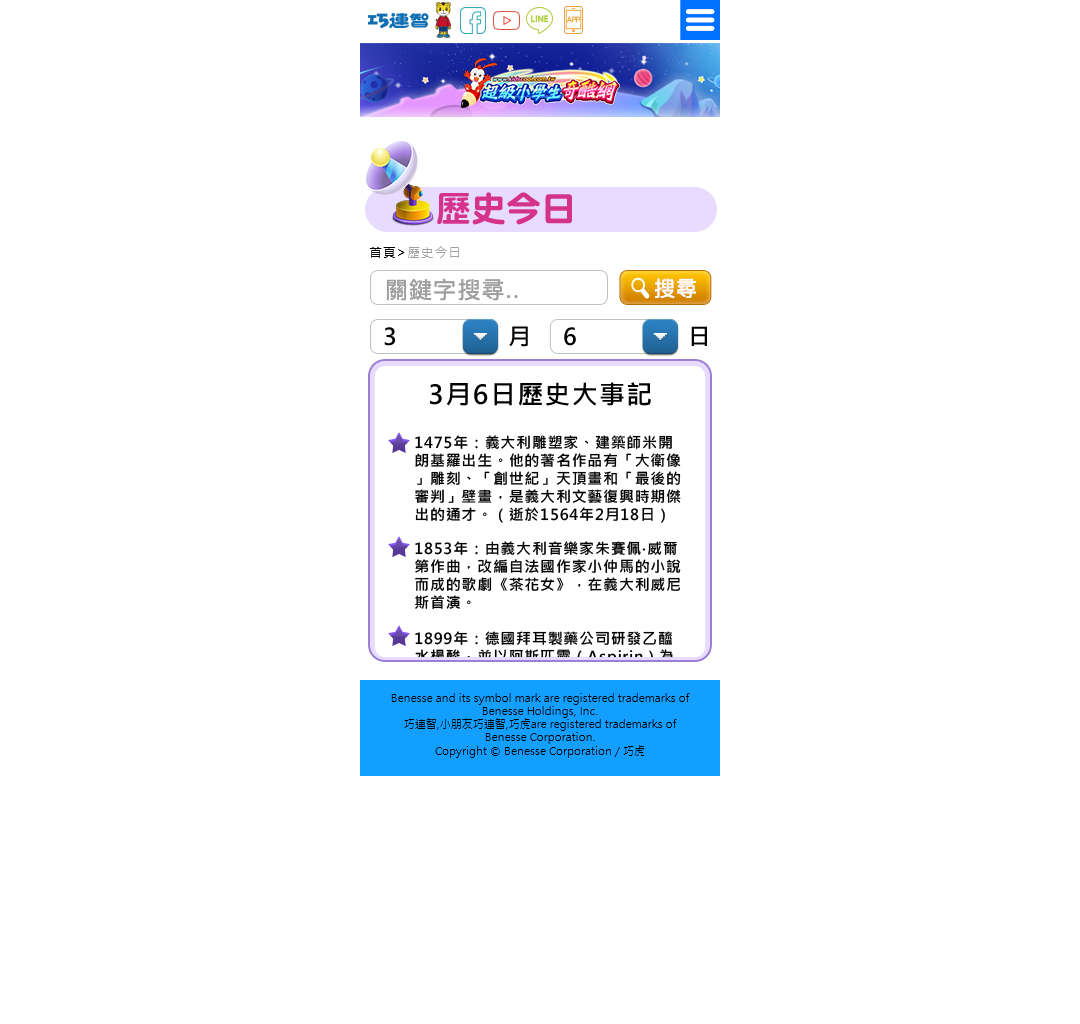
<style>
.page{position:relative;width:1080px;height:1024px;background:#ffffff}
.page>*{position:absolute;margin:0}
.t1{font:35px "DFYuanStd-W9";color:#d4328b}
.t2{font:13px "MicrosoftJhengHeiRegular";letter-spacing:0.05em;color:#9f9f9f}
.t3{font:13px "MicrosoftJhengHeiRegular";letter-spacing:0.05em;color:#000000}
.t4{font:23px "PingFangTC-Regular";letter-spacing:0.05em;color:#9f9f9f}
.t5{font:21px "PingFangTC-Regular";letter-spacing:0.05em;color:#ffffff}
.t6{font:23px "MicrosoftJhengHeiBold";letter-spacing:0.05em;color:#000000}
.t7{font:26px "MicrosoftJhengHeiBold";letter-spacing:0.05em;color:#000000}
.t8{font:15px "MicrosoftJhengHeiBold";letter-spacing:0.05em;color:#000000}
.t9{font:15px "MicrosoftJhengHeiBold";letter-spacing:0.05em}
</style>
<div class="page">
<p class="t1" style="left:437px;top:192px;width:135px;height:33px">歷史今日</p>
<p class="t2" style="left:369px;top:246px;width:90px;height:12px"><span class="t3">首頁&gt;</span>歷史今日</p>
<p class="t4" style="left:386px;top:278px;width:132px;height:23px">關鍵字搜尋..</p>
<p class="t5" style="left:654px;top:278px;width:42px;height:21px">搜尋</p>
<p class="t6" style="left:384px;top:327px;width:11px;height:19px">3</p>
<p class="t6" style="left:509px;top:326px;width:19px;height:21px">月</p>
<p class="t6" style="left:564px;top:327px;width:12px;height:19px">6</p>
<p class="t6" style="left:691px;top:326px;width:16px;height:20px">日</p>
<p class="t7" style="left:430px;top:382px;width:221px;height:24px">3月6日歷史大事記</p>
<p class="t8" style="left:415px;top:435px;width:266px;height:88px">1475年：義大利雕塑家、建築師米開朗基羅出生。他的著名作品有「大衛像」雕刻、「創世紀」天頂畫和「最後的審判」壁畫，是義大利文藝復興時期傑出的通才。（逝於1564年2月18日）</p>
<p class="t8" style="left:415px;top:541px;width:266px;height:68px">1853年：由義大利音樂家朱賽佩‧威爾第作曲，改編自法國作家小仲馬的小說而成的歌劇《茶花女》，在義大利威尼斯首演。</p>
<p class="t9" style="left:415px;top:631px;width:266px;height:68px">1899年：德國拜耳製藥公司研發乙醯水楊酸，並以阿斯匹靈（Aspirin）為商標註冊，並公開發售，如今是世界上最廣泛使用的藥物之一。</p>
</div>
